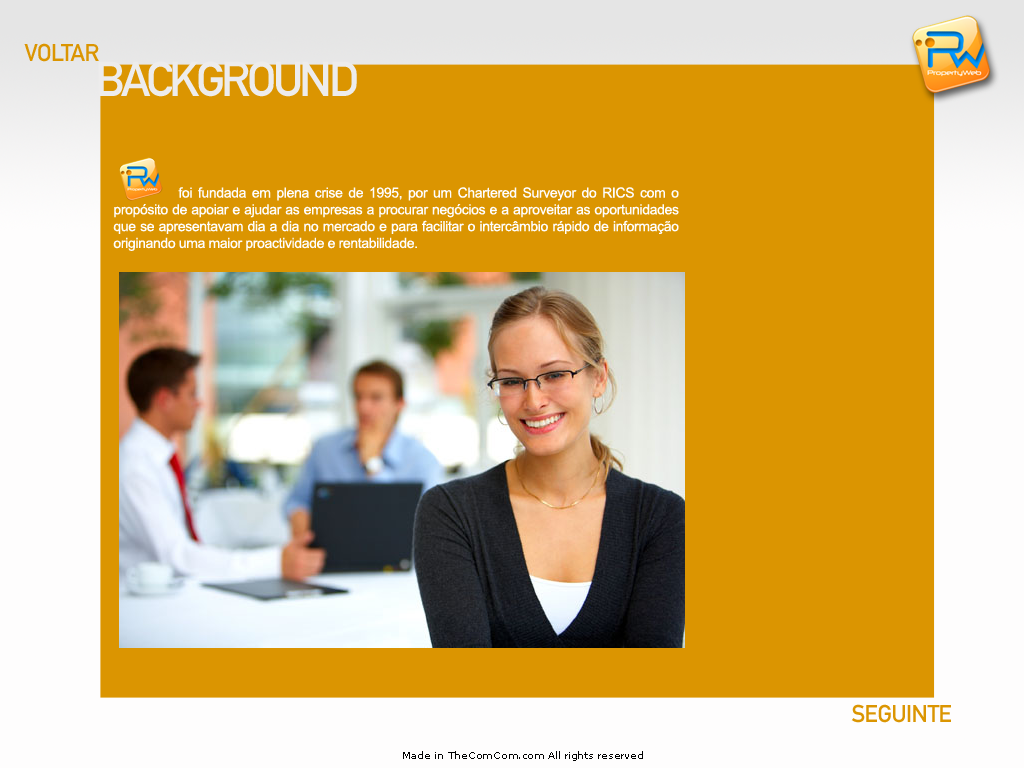
<style>
.page{position:relative;width:1024px;height:768px;background:#db9501}
.page>*{position:absolute;margin:0}
.t1{font:24px "DINMittelschriftStd";letter-spacing:-0.025em;color:#db9501}
.t2{font:48px "DINMittelschriftStd";letter-spacing:-0.075em;color:#edecec}
.t3{font:14px "ArialMT";letter-spacing:-0.025em;color:#fefdfd}
.t4{font:14px "Arial-BoldMT";letter-spacing:-0.025em;color:#020202}
.t5{font:10px "MSReferenceSansSerif";letter-spacing:-0.025em;color:#010101}
</style>
<div class="page">
<p class="t1" style="left:24px;top:43px;width:75px;height:19px">VOLTAR</p>
<p class="t2" style="left:98px;top:61px;width:259px;height:36px">BACKGROUND</p>
<p class="t3" style="left:113px;top:187px;width:566px;height:64px;text-align:justify"><span class="t4">      </span> foi fundada em plena crise de 1995, por um Chartered Surveyor do RICS com o propósito de apoiar e ajudar as empresas a procurar negócios e a aproveitar as oportunidades que se apresentavam dia a dia no mercado e para facilitar o intercâmbio rápido de informação originando uma maior proactividade e rentabilidade.</p>
<p class="t1" style="left:851px;top:704px;width:100px;height:19px">SEGUINTE</p>
<p class="t5" style="left:403px;top:751px;width:240px;height:10px">Made in TheComCom.com All rights reserved</p>
</div>
